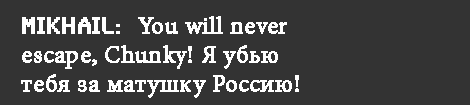
<style>
.page{position:relative;width:470px;height:105px;background:#333333}
.page>*{position:absolute;margin:0}
.t1{font:24px "MinionPro-Regular";color:#ffffff;font-weight:bold}
.t2{font:24px "SynchroLET";color:#ffffff;font-weight:bold}
</style>
<div class="page">
<p class="t1" style="left:21px;top:16px;width:278px;height:82px"><span class="t2">MIKHAIL:  </span>You will never <br>escape, Chunky! Я убью <br>тебя за матушку Россию!</p>
</div>
